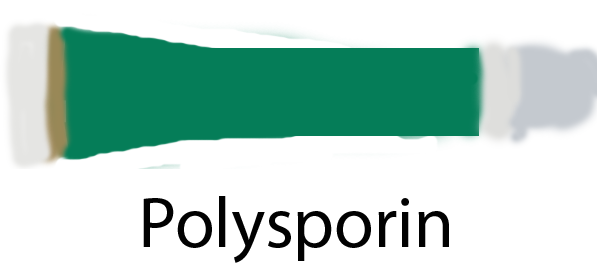
<style>
.page{position:relative;width:597px;height:277px;background:#ffffff}
.page>*{position:absolute;margin:0}
.t1{font:72px "MyriadPro-Regular";color:#010101}
</style>
<div class="page">
<p class="t1" style="left:143px;top:196px;width:306px;height:67px">Polysporin</p>
</div>
